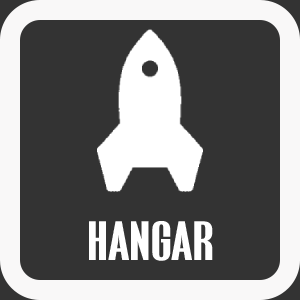
<style>
.page{position:relative;width:300px;height:300px;background:#333333}
.page>*{position:absolute;margin:0}
.t1{font:55px "BluefishDemo-Bold";color:#ffffff}
</style>
<div class="page">
<p class="t1" style="left:89px;top:221px;width:124px;height:40px">HANGAR</p>
</div>
